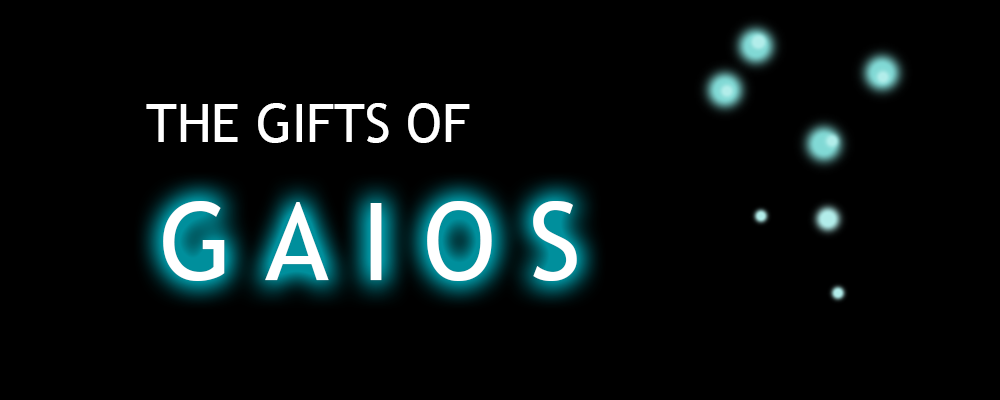
<style>
.page{position:relative;width:1000px;height:400px;background:#000000}
.page>*{position:absolute;margin:0}
.t1{font:53px "TrebuchetMS";color:#ffffff}
.t2{font:108px "TrebuchetMS";letter-spacing:0.3em;color:#ffffff}
</style>
<div class="page">
<p class="t1" style="left:146px;top:103px;width:324px;height:40px">THE GIFTS OF</p>
<p class="t2" style="left:163px;top:201px;width:414px;height:80px">GAIOS</p>
</div>
